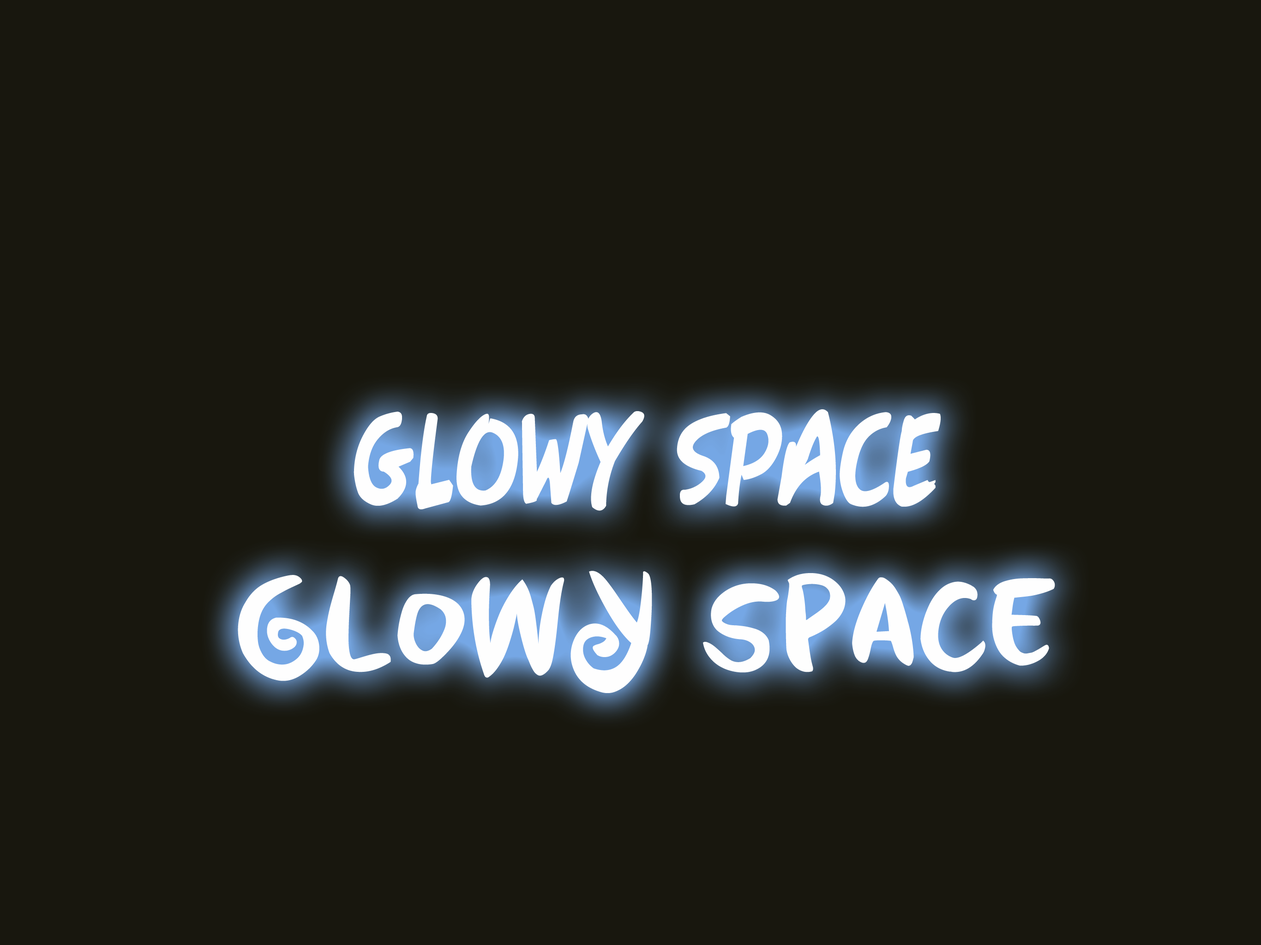
<style>
.page{position:relative;width:1261px;height:945px;background:#18170e}
.page>*{position:absolute;margin:0}
.t1{font:138.5px "FawnScript";color:#fefefe}
.t2{font:138.5px "kabayan";color:#fefefe}
</style>
<div class="page">
<p class="t1" style="left:238px;top:409px;width:817px;height:284px;text-align:center">GLOWY SPACE<br><span class="t2">Glowy Space</span></p>
</div>
